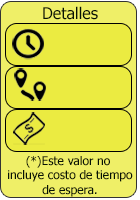
<style>
.page{position:relative;width:140px;height:200px;background:#ebeb41}
.page>*{position:absolute;margin:0}
.t1{font:16px "Tahoma";color:#061206}
.t2{font:12px "Tahoma";color:#061206}
</style>
<div class="page">
<p class="t1" style="left:43px;top:6px;width:55px;height:14px">Detalles</p>
<p class="t2" style="left:8px;top:156px;width:125px;height:41px;text-align:center">(*)Este valor no<br> incluye costo de tiempo<br> de espera.</p>
</div>
